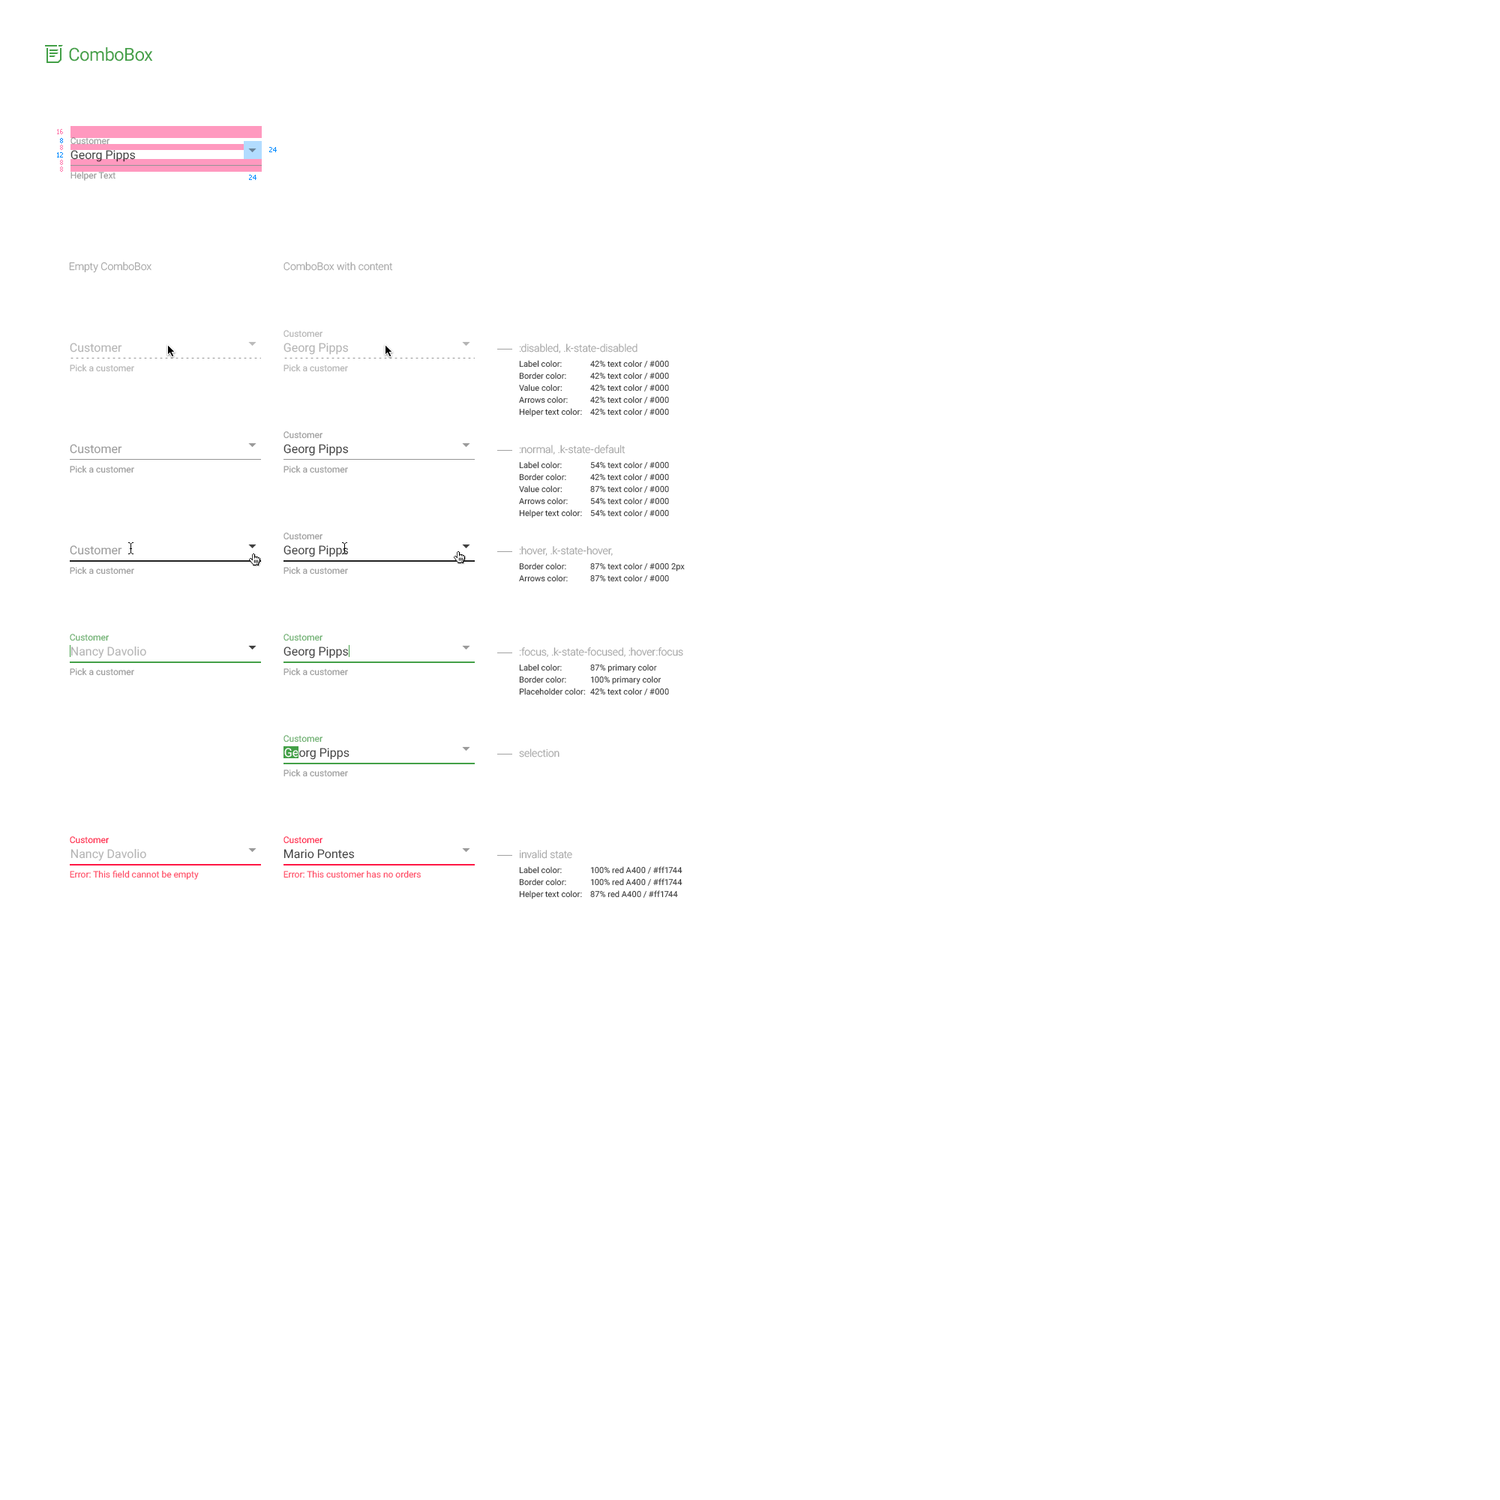
<style>
.page{position:relative;width:1500px;height:1500px;background:#ffffff}
.page>*{position:absolute;margin:0}
.t1{font:18px "Roboto-Regular";letter-spacing:-0.025em;color:#43a047}
.t2{font:6.8px "Tahoma";color:#ff7cae}
.t3{font:9px "Roboto-Regular";color:#9a9a9a}
.t4{font:6.8px "Tahoma";color:#008aff}
.t5{font:12px "Roboto-Regular";color:#404040}
.t6{font:10.5px "Roboto-Light";color:#a1a1a1}
.t7{font:9px "Roboto-Regular";color:#b4b4b4}
.t8{font:12px "Roboto-Regular";color:#b4b4b4}
.t9{font:8.2px/12px "Roboto-Regular";color:#383838}
.t10{font:8.2px/54px "Roboto-Regular";color:#383838}
.t11{font:12px "Roboto-Regular";color:#9a9a9a}
.t12{font:9px "Roboto-Regular";color:#66ae69}
.t13{font:12px "Roboto-Regular";color:#ffffff}
.t14{font:9px "Roboto-Regular";color:#ff1744}
.t15{font:9px "Roboto-Regular";color:#ff4c67}
</style>
<div class="page">
<p class="t1" style="left:69px;top:47px;width:84px;height:15px">ComboBox</p>
<p class="t2" style="left:57px;top:129px;width:6px;height:5px">16</p>
<p class="t3" style="left:70px;top:137px;width:40px;height:8px">Customer</p>
<p class="t2" style="left:60px;top:145px;width:3px;height:5px">8</p>
<p class="t4" style="left:60px;top:138px;width:3px;height:5px">8</p>
<p class="t5" style="left:70px;top:150px;width:66px;height:12px">Georg Pipps</p>
<p class="t4" style="left:269px;top:147px;width:8px;height:5px">24</p>
<p class="t4" style="left:57px;top:152px;width:6px;height:6px">12</p>
<p class="t2" style="left:60px;top:160px;width:3px;height:5px">8</p>
<p class="t2" style="left:60px;top:166px;width:3px;height:6px">8</p>
<p class="t3" style="left:70px;top:171px;width:46px;height:10px">Helper Text</p>
<p class="t4" style="left:249px;top:175px;width:7px;height:5px">24</p>
<p class="t6" style="left:69px;top:262px;width:83px;height:11px">Empty ComboBox</p>
<p class="t6" style="left:284px;top:262px;width:109px;height:9px">ComboBox with content</p>
<p class="t7" style="left:284px;top:330px;width:39px;height:8px">Customer</p>
<p class="t8" style="left:70px;top:343px;width:52px;height:9px">Customer</p>
<p class="t8" style="left:284px;top:343px;width:65px;height:12px">Georg Pipps</p>
<p class="t7" style="left:70px;top:364px;width:64px;height:8px">Pick a customer</p>
<p class="t7" style="left:284px;top:364px;width:64px;height:8px">Pick a customer</p>
<p class="t9" style="left:519px;top:360px;width:63px;height:57px"><span class="t10">Label color:<br></span>Border color:<br>Value color:<br>Arrows color:<br>Helper text color:</p>
<p class="t9" style="left:590px;top:360px;width:79px;height:56px"><span class="t10">42% text color / #000<br></span>42% text color / #000<br>42% text color / #000<br>42% text color / #000<br>42% text color / #000</p>
<p class="t3" style="left:284px;top:431px;width:39px;height:8px">Customer</p>
<p class="t11" style="left:70px;top:444px;width:52px;height:10px">Customer</p>
<p class="t5" style="left:284px;top:444px;width:65px;height:12px">Georg Pipps</p>
<p class="t9" style="left:519px;top:461px;width:63px;height:57px"><span class="t10">Label color:<br></span>Border color:<br>Value color:<br>Arrows color:<br>Helper text color:</p>
<p class="t9" style="left:590px;top:461px;width:79px;height:56px"><span class="t10">54% text color / #000<br></span>42% text color / #000<br>87% text color / #000<br>54% text color / #000<br>54% text color / #000</p>
<p class="t3" style="left:70px;top:465px;width:64px;height:8px">Pick a customer</p>
<p class="t3" style="left:284px;top:465px;width:64px;height:8px">Pick a customer</p>
<p class="t3" style="left:284px;top:532px;width:39px;height:8px">Customer</p>
<p class="t11" style="left:70px;top:545px;width:52px;height:10px">Customer</p>
<p class="t5" style="left:284px;top:545px;width:65px;height:12px">Georg Pipps</p>
<p class="t3" style="left:70px;top:566px;width:64px;height:8px">Pick a customer</p>
<p class="t3" style="left:284px;top:566px;width:64px;height:8px">Pick a customer</p>
<p class="t9" style="left:519px;top:562px;width:49px;height:20px">Border color:<br>Arrows color:</p>
<p class="t9" style="left:590px;top:562px;width:95px;height:20px">87% text color / #000 2px<br>87% text color / #000</p>
<p class="t12" style="left:70px;top:634px;width:40px;height:7px">Customer</p>
<p class="t12" style="left:284px;top:634px;width:39px;height:7px">Customer</p>
<p class="t8" style="left:70px;top:646px;width:76px;height:12px">Nancy Davolio</p>
<p class="t5" style="left:284px;top:646px;width:65px;height:12px">Georg Pipps</p>
<p class="t9" style="left:519px;top:664px;width:67px;height:31px"><span class="t10">Label color:<br></span>Border color:<br>Placeholder color:</p>
<p class="t9" style="left:590px;top:664px;width:79px;height:31px"><span class="t10">87% primary color<br></span>100% primary color<br>42% text color / #000</p>
<p class="t3" style="left:70px;top:668px;width:64px;height:8px">Pick a customer</p>
<p class="t3" style="left:284px;top:668px;width:64px;height:8px">Pick a customer</p>
<p class="t12" style="left:284px;top:735px;width:39px;height:7px">Customer</p>
<p class="t13" style="left:284px;top:748px;width:14px;height:10px">Ge</p>
<p class="t5" style="left:299px;top:748px;width:51px;height:12px">org Pipps</p>
<p class="t3" style="left:284px;top:769px;width:64px;height:8px">Pick a customer</p>
<p class="t14" style="left:70px;top:836px;width:40px;height:8px">Customer</p>
<p class="t14" style="left:284px;top:836px;width:39px;height:8px">Customer</p>
<p class="t8" style="left:70px;top:848px;width:76px;height:13px">Nancy Davolio</p>
<p class="t5" style="left:284px;top:849px;width:71px;height:10px">Mario Pontes</p>
<p class="t15" style="left:70px;top:870px;width:129px;height:10px">Error: This field cannot be empty</p>
<p class="t15" style="left:284px;top:870px;width:137px;height:8px">Error: This customer has no orders</p>
<p class="t9" style="left:519px;top:866px;width:63px;height:33px"><span class="t10">Label color:<br></span>Border color:<br>Helper text color:</p>
<p class="t9" style="left:590px;top:866px;width:92px;height:32px"><span class="t10">100% red A400 / #ff1744<br></span>100% red A400 / #ff1744<br>87% red A400 / #ff1744</p>
</div>
